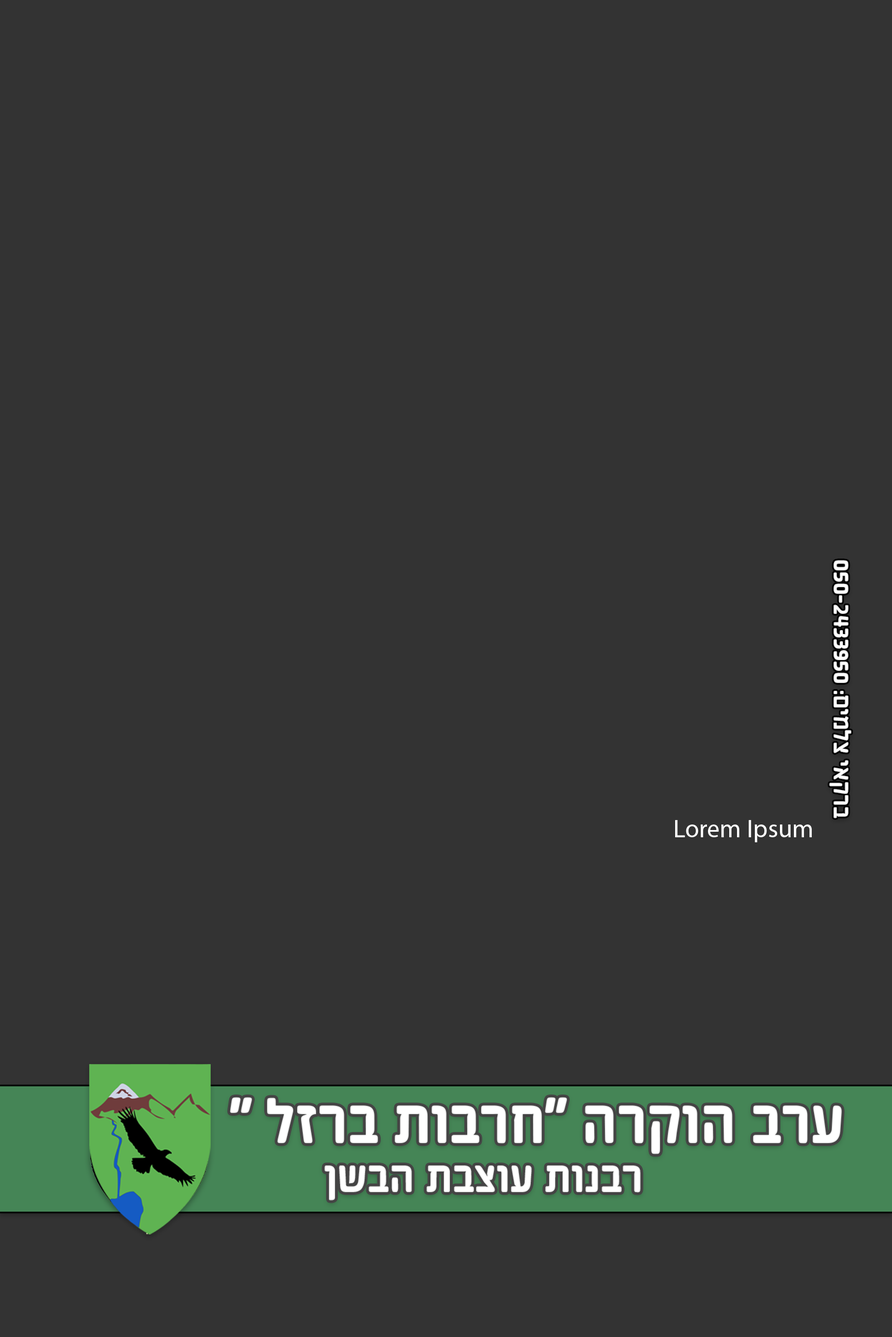
<style>
.page{position:relative;width:892px;height:1337px;background:#333333}
.page>*{position:absolute;margin:0}
.t1{font:25.5px "FtJimboryRounded1.01-Bold";color:#ffffff}
.t2{font:25.5px "MyriadHebrew-Regular";color:#ffffff}
.t3{font:65px "FtJimboryRounded1.01-Bold";color:#ffffff}
.t4{font:46.4px "FtJimboryRounded1.01-Bold";color:#ffffff}
</style>
<div class="page">
<p class="t1" style="left:829px;top:560px;width:22px;height:259px;rotate:90deg">ברקאי צלמים: 050-2433950</p>
<p class="t2" style="left:675px;top:820px;width:137px;height:23px">Lorem Ipsum</p>
<p class="t3" style="left:230px;top:1097px;width:611px;height:58px">ערב הוקרה "חרבות ברזל "</p>
<p class="t4" style="left:324px;top:1166px;width:316px;height:35px">רבנות עוצבת הבשן</p>
</div>
